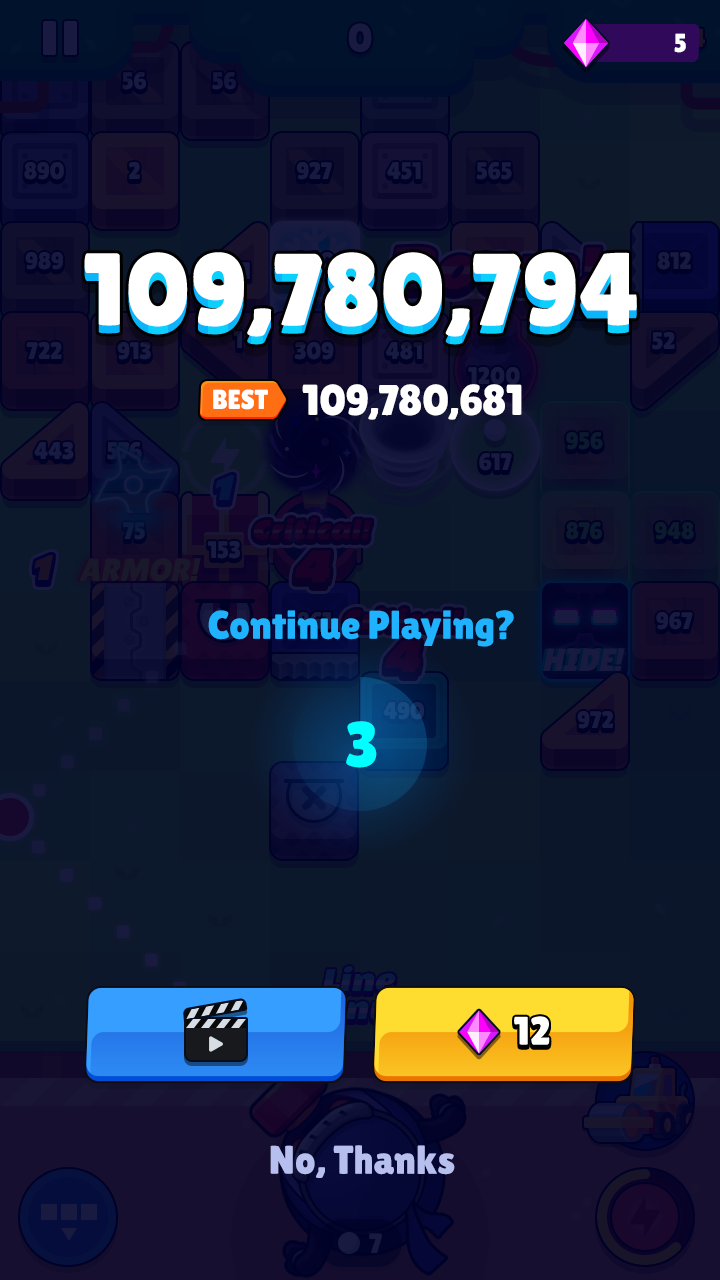
<style>
.page{position:relative;width:720px;height:1280px}
.page>*{position:absolute;margin:0}
.t1{font:26px "LilitaOne";letter-spacing:-0.01em;color:#ffffff;text-transform:uppercase}
.t2{font:102.9px "LilitaOne";color:#ffffff}
.t3{font:27.6px "LilitaOne";color:#ffffff;text-transform:uppercase}
.t4{font:43.2px "LilitaOne";color:#ffffff;text-transform:uppercase}
.t5{font:40px "LilitaOne";color:#1fb3ff}
.t6{font:64px "LilitaOne";color:#00ffff}
.t7{font:40px "LilitaOne";color:#ffffff}
.t8{font:40px "LilitaOne";color:#b6bfee}
</style>
<div class="page">
<p class="t1" style="left:674px;top:33px;width:12px;height:20px">5</p>
<p class="t2" style="left:84px;top:252px;width:553px;height:85px">109,780,794</p>
<p class="t2" style="left:84px;top:260px;width:553px;height:85px">109,780,794</p>
<p class="t3" style="left:213px;top:389px;width:55px;height:21px">Best</p>
<p class="t4" style="left:302px;top:384px;width:220px;height:36px">109,780,681</p>
<p class="t5" style="left:208px;top:610px;width:306px;height:37px">Continue Playing?</p>
<p class="t6" style="left:346px;top:721px;width:31px;height:47px">3</p>
<p class="t7" style="left:514px;top:1016px;width:36px;height:29px">12</p>
<p class="t8" style="left:270px;top:1145px;width:185px;height:33px">No, Thanks</p>
</div>
